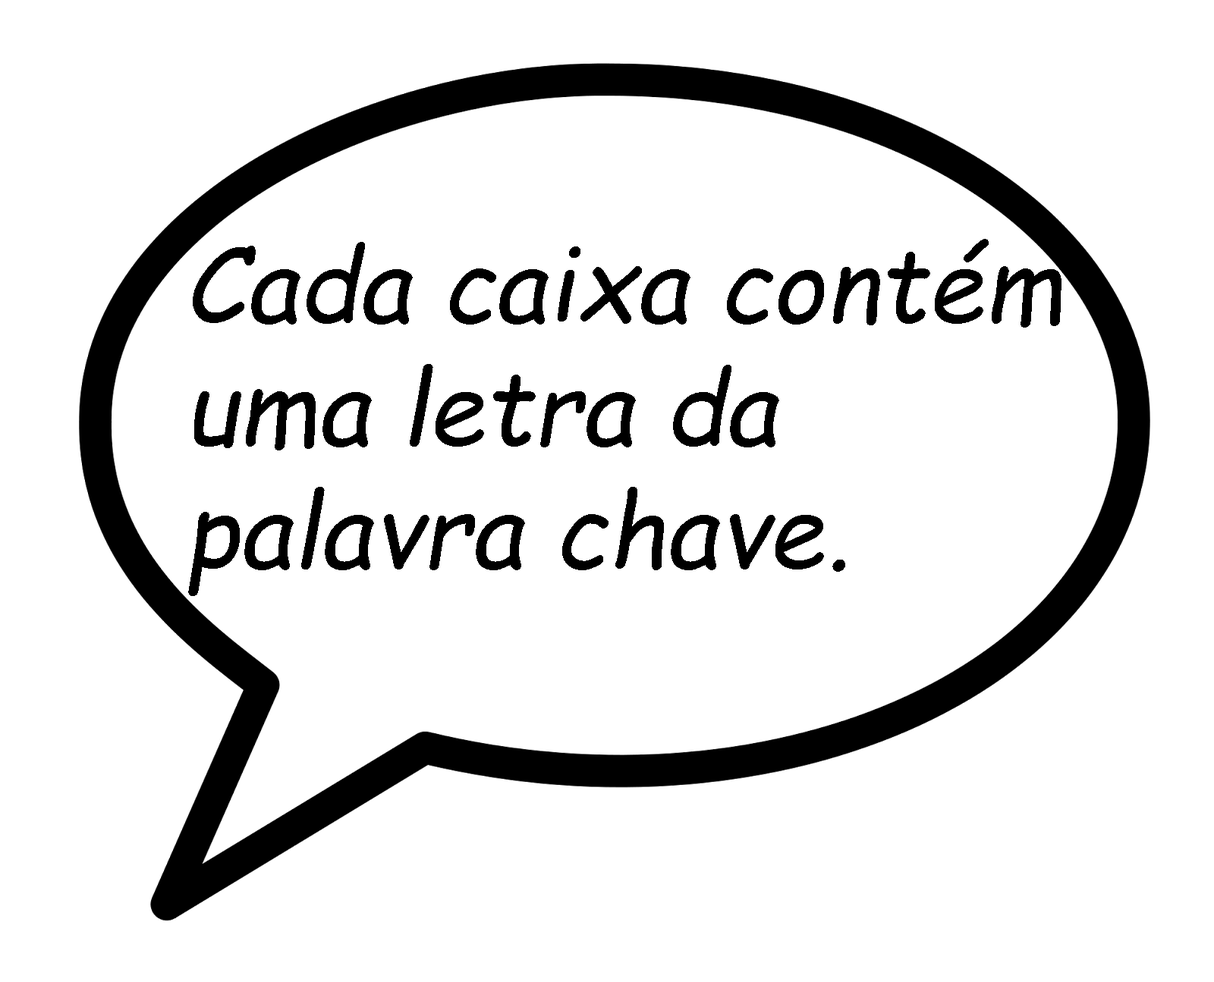
<style>
.page{position:relative;width:1214px;height:982px;background:#ffffff}
.page>*{position:absolute;margin:0}
.t1{font:102.4px "ComicSansMS-Italic";color:#000000}
</style>
<div class="page">
<p class="t1" style="left:188px;top:239px;width:873px;height:357px">Cada caixa contém uma letra da palavra chave.</p>
</div>
